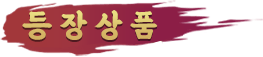
<style>
.page{position:relative;width:263px;height:57px;background:#ffffff}
.page>*{position:absolute;margin:0}
.t1{font:33px "BMEULJIROTTF";letter-spacing:0.24em;color:#e3bb64}
</style>
<div class="page">
<p class="t1" style="left:22px;top:10px;width:136px;height:30px">등장상품</p>
</div>
